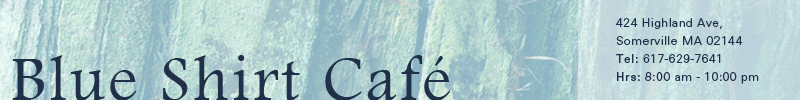
<style>
.page{position:relative;width:800px;height:100px}
.page>*{position:absolute;margin:0}
.t1{font:12px/18px "Univers-Light";letter-spacing:0.05em;color:#203049}
.t2{font:12px/18px "Univers";letter-spacing:0.05em;color:#203049}
.t3{font:64.9px "FootlightMTLight";letter-spacing:0.05em;color:#203049}
</style>
<div class="page">
<p class="t1" style="left:616px;top:18px;width:143px;height:66px">424 Highland Ave, <br>Somerville MA 02144<br><span class="t2">Tel:</span> 617-629-7641<br><span class="t2">Hrs:</span> 8:00 am - 10:00 pm</p>
<p class="t3" style="left:12px;top:55px;width:438px;height:46px">Blue Shirt Café</p>
</div>
